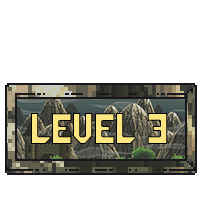
<style>
.page{position:relative;width:200px;height:200px;background:#ffffff}
.page>*{position:absolute;margin:0}
.t1{font:34.9px "GalacticaGridRegular";color:#fce583;scale:0.97 1}
</style>
<div class="page">
<p class="t1" style="left:31px;top:113px;width:137px;height:31px">Level 3</p>
</div>
